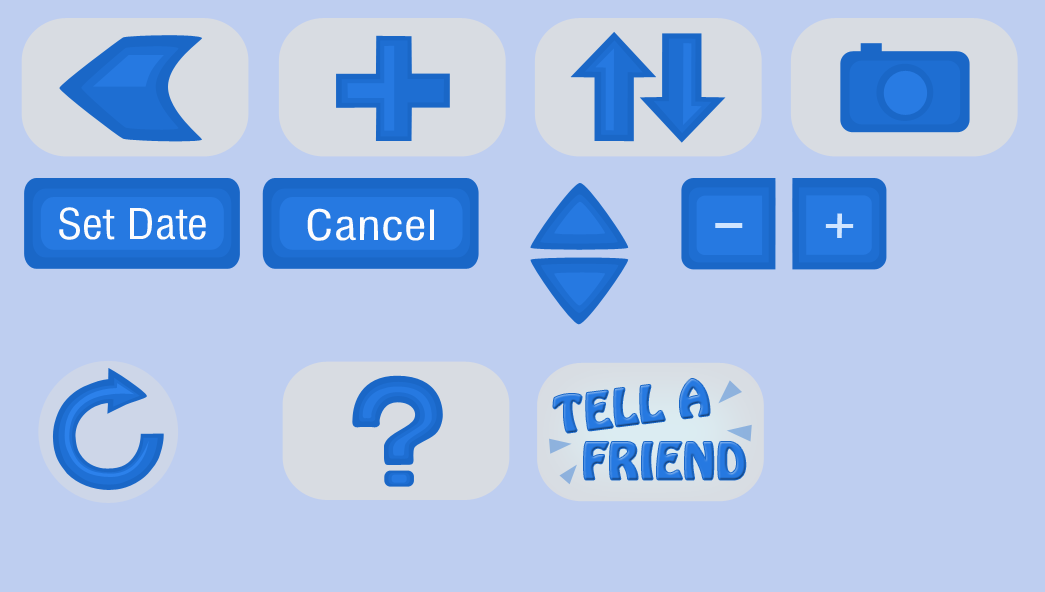
<style>
.page{position:relative;width:1045px;height:592px;background:#becef0}
.page>*{position:absolute;margin:0}
.t1{font:41.1px "Milford";color:#fcfcfd}
.t2{font:40.5px "Milford";color:#fcfcfd;scale:1.07 1}
.t3{font:41.5px "MilfordBold";color:#d0e5ff;scale:0.95 1}
.t4{font:51.5px "MilfordBold";color:#d0e5ff;scale:0.89 1}
.t5{font:43.9px "HoboStd";letter-spacing:0.01em;color:#2679e1;font-weight:bold}
</style>
<div class="page">
<p class="t1" style="left:59px;top:207px;width:147px;height:33px">Set Date</p>
<p class="t2" style="left:307px;top:208px;width:127px;height:33px">Cancel</p>
<p class="t3" style="left:825px;top:213px;width:29px;height:25px">+</p>
<p class="t4" style="left:715px;top:223px;width:28px;height:5px">_</p>
<p class="t5" style="left:553px;top:379px;width:157px;height:54px;rotate:-7deg">TELL A</p>
<p class="t5" style="left:584px;top:442px;width:162px;height:38px">FRIEND</p>
</div>
